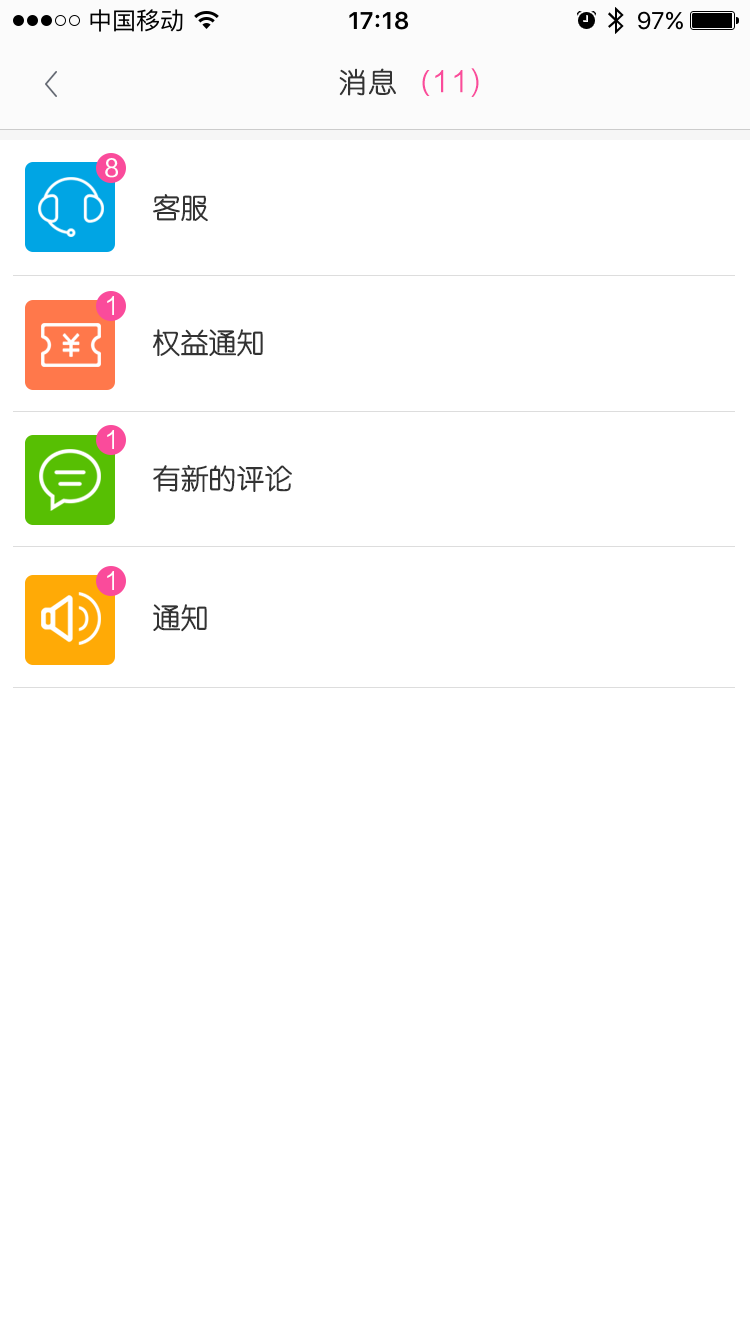
<style>
.page{position:relative;width:750px;height:1334px;background:#ffffff}
.page>*{position:absolute;margin:0}
.t1{font:28px "STYuanti-SC-Regular";letter-spacing:0.075em;color:#333333}
.t2{font:28px "FZLTHK_ZJRB--GBK1-0";letter-spacing:0.075em;color:#fa4b9b}
.t3{font:28px "MicrosoftYaHei";letter-spacing:0.075em;color:#333333}
.t4{font:28px "MicrosoftYaHei";letter-spacing:0.075em;color:#fa4b9b}
.t5{font:24px "FZLTHK_ZJRB--GBK1-0";color:#fffefe}
.t6{font:28px "STYuanti-SC-Regular";color:#333333}
</style>
<div class="page">
<p class="t1" style="left:339px;top:68px;width:57px;height:28px">消息</p>
<p class="t2" style="left:422px;top:68px;width:57px;height:29px"><span class="t3"> </span><span class="t4">(</span>11)</p>
<p class="t5" style="left:105px;top:158px;width:13px;height:20px">8</p>
<p class="t6" style="left:153px;top:194px;width:55px;height:28px">客服</p>
<p class="t5" style="left:107px;top:296px;width:7px;height:19px">1</p>
<p class="t6" style="left:152px;top:329px;width:111px;height:28px">权益通知</p>
<p class="t5" style="left:107px;top:430px;width:7px;height:19px">1</p>
<p class="t6" style="left:153px;top:465px;width:139px;height:27px">有新的评论</p>
<p class="t5" style="left:107px;top:571px;width:7px;height:19px">1</p>
<p class="t6" style="left:153px;top:604px;width:54px;height:28px">通知</p>
</div>
